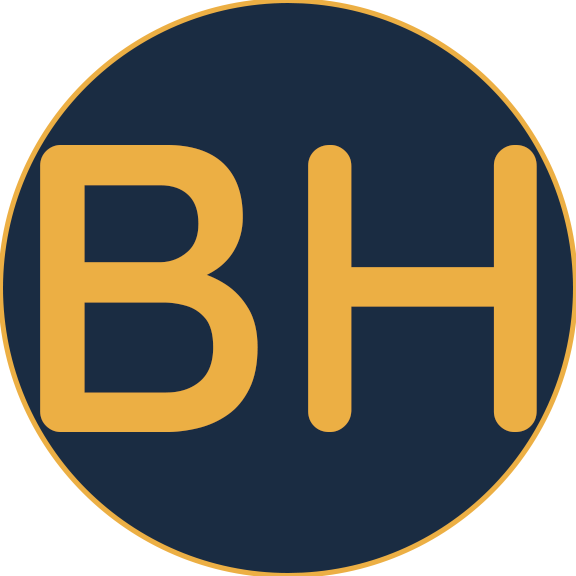
<style>
.page{position:relative;width:576px;height:576px;background:#1a2c42}
.page>*{position:absolute;margin:0}
.t1{font:410px "Quicksand-SemiBold";color:#ecaf44}
</style>
<div class="page">
<p class="t1" style="left:40px;top:145px;width:497px;height:287px">BH</p>
</div>
